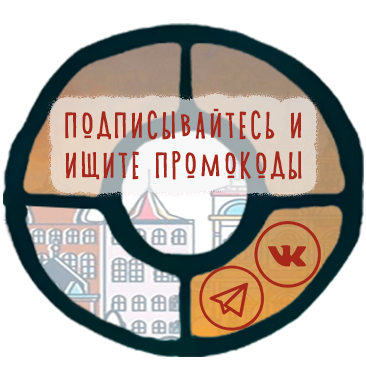
<style>
.page{position:relative;width:366px;height:366px;background:#ffffff}
.page>*{position:absolute;margin:0}
.t1{font:30px/40px "Shnobel-Regular";letter-spacing:0.06em;color:#a7281b;font-weight:bold;scale:1.05 1}
</style>
<div class="page">
<p class="t1" style="left:65px;top:108px;width:237px;height:72px;text-align:center">ПОДПИСЫВАЙТЕСЬ И<br>ИЩИТЕ ПРОМОКОДЫ</p>
</div>
